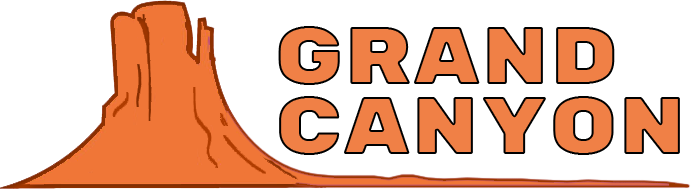
<style>
.page{position:relative;width:691px;height:189px;background:#ffffff}
.page>*{position:absolute;margin:0}
.t1{font:80.9px "RubikMonoOne-Regular";color:#f07637}
</style>
<div class="page">
<p class="t1" style="left:278px;top:26px;width:337px;height:59px">Grand</p>
<p class="t1" style="left:279px;top:96px;width:401px;height:59px">Canyon</p>
</div>
